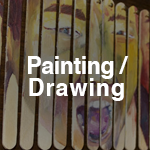
<style>
.page{position:relative;width:150px;height:150px}
.page>*{position:absolute;margin:0}
.t1{font:24px/22.3px "Helvetica-Bold";letter-spacing:-0.02em;color:#ffffff;scale:0.97 1}
.t2{font:24px/22.3px "Helvetica-Bold";letter-spacing:0.04em;color:#ffffff;scale:0.97 1}
</style>
<div class="page">
<p class="t1" style="left:28px;top:56px;width:101px;height:45px;text-align:center">Painting /<br><span class="t2">Drawing</span></p>
</div>
